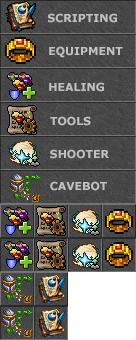
<style>
.page{position:relative;width:136px;height:340px}
.page>*{position:absolute;margin:0}
.t1{font:11px "Verdana-Bold";color:#c0c0c0;text-transform:uppercase}
</style>
<div class="page">
<p class="t1" style="left:48px;top:13px;width:69px;height:10px">Scripting</p>
<p class="t1" style="left:49px;top:46px;width:74px;height:12px">Equipment</p>
<p class="t1" style="left:49px;top:82px;width:55px;height:10px">hEALING</p>
<p class="t1" style="left:50px;top:116px;width:41px;height:10px">Tools</p>
<p class="t1" style="left:50px;top:149px;width:59px;height:10px">Shooter</p>
<p class="t1" style="left:50px;top:181px;width:57px;height:10px">CaveBot</p>
</div>
